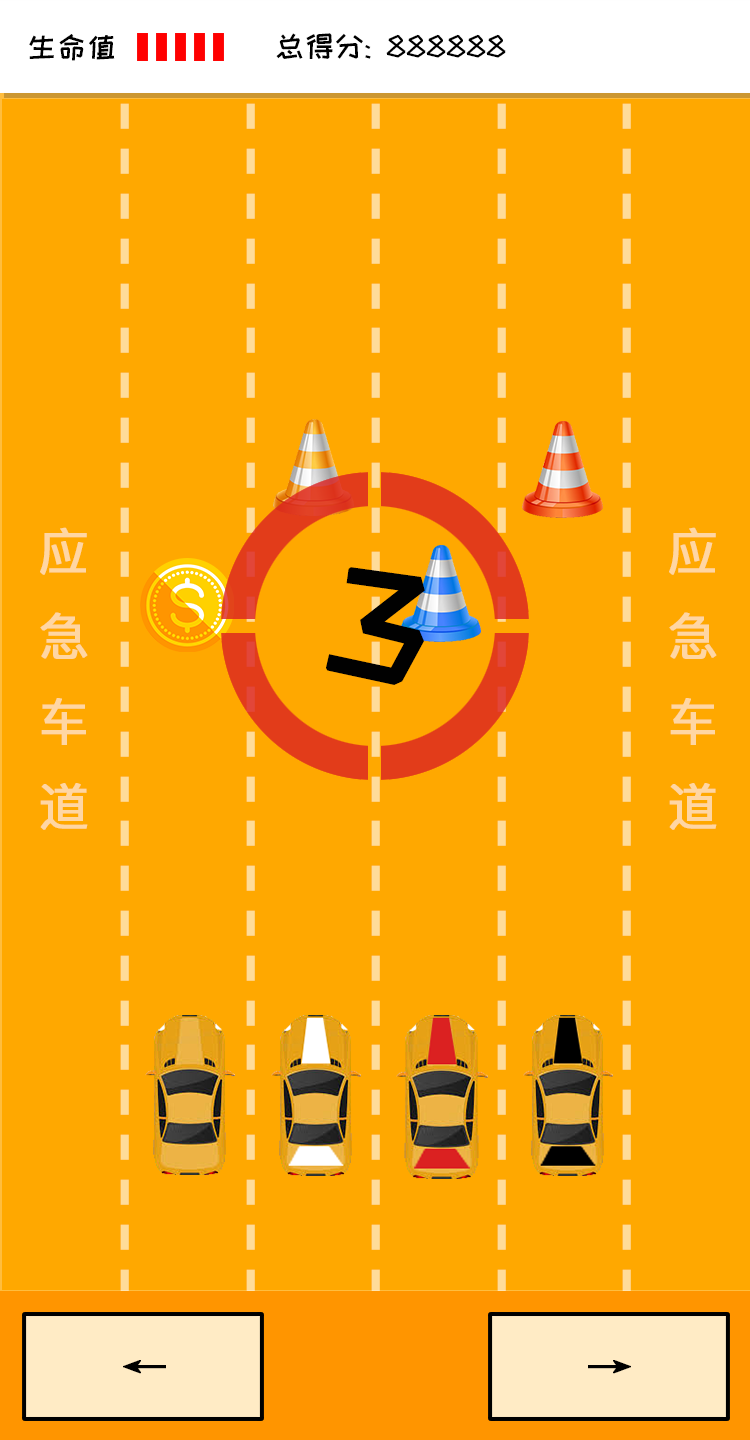
<style>
.page{position:relative;width:750px;height:1440px;background:#ffa800}
.page>*{position:absolute;margin:0}
.t1{font:30px "HappyZcool-2016";color:#000000}
.t2{font:50px/85px "PingFangSC-Regular";color:#ffd6a3;font-weight:bold}
.t3{font:150px "HappyZcool-2016";letter-spacing:0.18em;color:#010101;font-weight:bold}
.t4{font:50px "HappyZcool-2016";color:#000000;font-weight:bold}
</style>
<div class="page">
<p class="t1" style="left:29px;top:34px;width:86px;height:27px">生命值</p>
<p class="t1" style="left:276px;top:33px;width:230px;height:26px">总得分: 888888</p>
<p class="t2" style="left:40px;top:527px;width:48px;height:303px">应<br>急<br>车<br>道</p>
<p class="t2" style="left:669px;top:527px;width:48px;height:303px">应<br>急<br>车<br>道</p>
<p class="t3" style="left:326px;top:567px;width:99px;height:118px">3</p>
<p class="t4" style="left:123px;top:1360px;width:43px;height:14px;rotate:180deg">→</p>
<p class="t4" style="left:588px;top:1360px;width:43px;height:14px">→</p>
</div>
